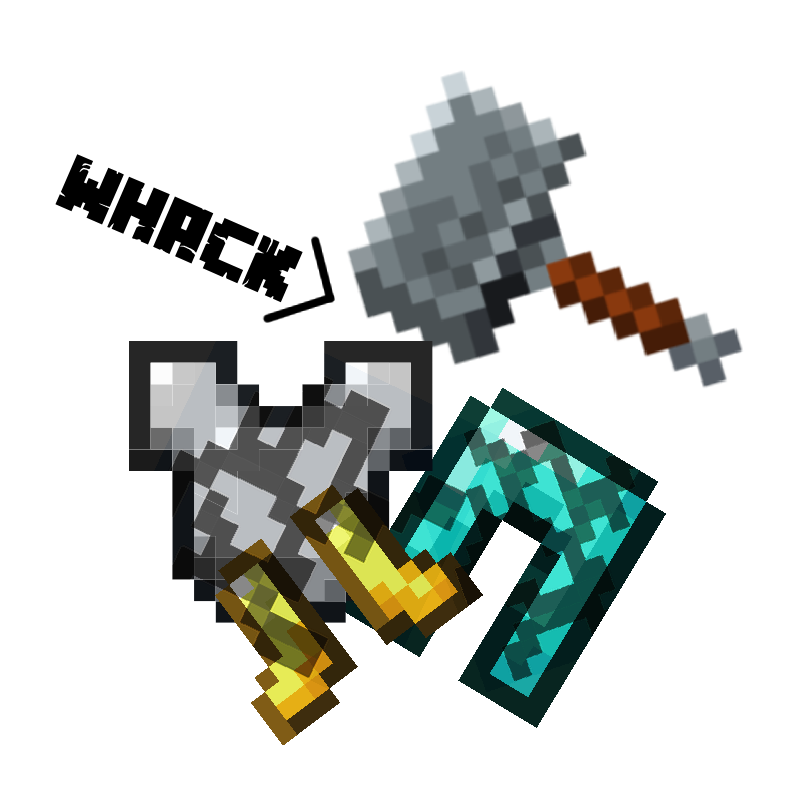
<style>
.page{position:relative;width:800px;height:800px;background:#ffffff}
.page>*{position:absolute;margin:0}
.t1{font:69.8px "MinecrafterAlt";color:#000000}
</style>
<div class="page">
<p class="t1" style="left:55px;top:154px;width:248px;height:149px;rotate:23deg">WHACK</p>
</div>
